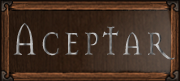
<style>
.page{position:relative;width:180px;height:81px}
.page>*{position:absolute;margin:0}
.t1{font:48.4px "Mason-Regular";letter-spacing:0.08em;scale:0.75 1}
</style>
<div class="page">
<p class="t1" style="left:13px;top:22px;width:162px;height:38px">Aceptar</p>
</div>
